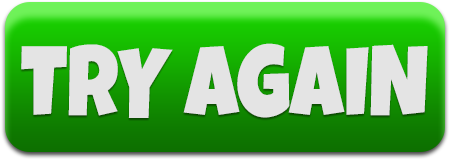
<style>
.page{position:relative;width:451px;height:161px;background:#e4e4e4}
.page>*{position:absolute;margin:0}
.t1{font:100px "LuckiestGuy-Regular";color:#e4e4e4;text-transform:uppercase;scale:0.85 1}
</style>
<div class="page">
<p class="t1" style="left:21px;top:43px;width:407px;height:75px">Try again</p>
</div>
